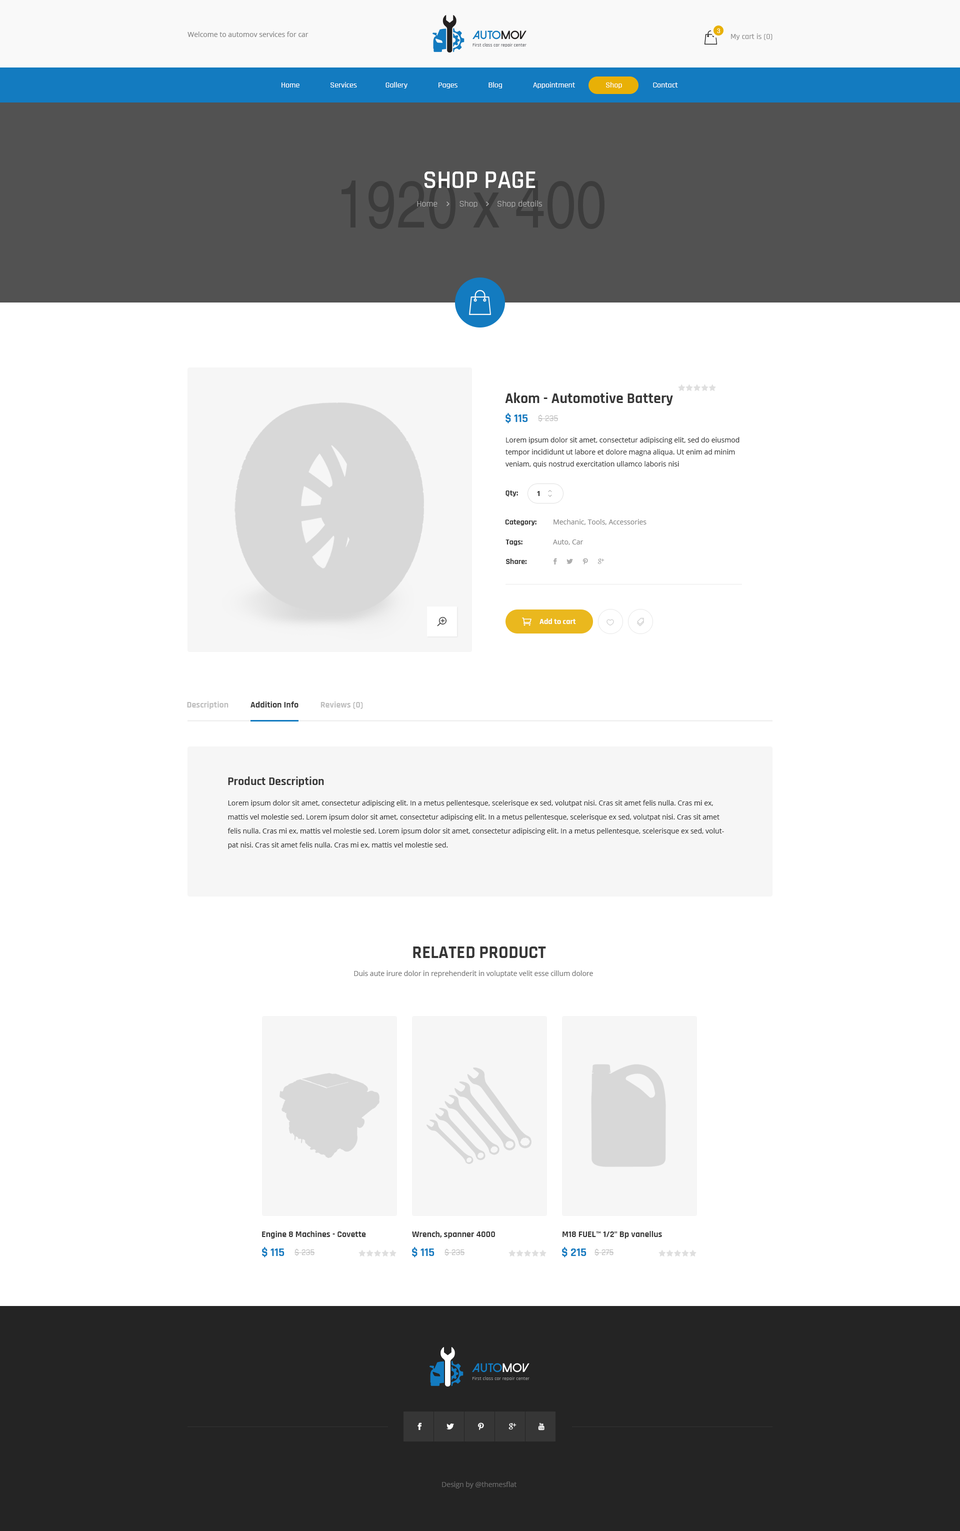
<style>
.page{position:relative;width:960px;height:1531px;background:#ffffff}
.page>*{position:absolute;margin:0}
.t1{font:6px "Poppins-Regular";color:#ffffff}
.t2{font:7px "OpenSans";color:#838383}
.t3{font:8px "Rajdhani-Medium";color:#8f8f8f}
.t4{font:8px "Rajdhani-Medium";color:#ffffff}
.t5{font:25px "Rajdhani-SemiBold";color:#ffffff;text-transform:uppercase}
.t6{font:9px "Rajdhani-Regular";color:#b5b5b5}
.t7{font:15px "Rajdhani-Bold";color:#363636}
.t8{font:12px "Rajdhani-Bold";color:#137bc0}
.t9{font:9px "Rajdhani-Regular";color:#b2b2b2}
.t10{font:7px/12px "OpenSans";color:#363636}
.t11{font:8px "Rajdhani-Bold";color:#363636}
.t12{font:7px "OpenSans-Bold";color:#363636}
.t13{font:7px "OpenSans";color:#868686}
.t14{font:8px "Rajdhani-Bold";color:#ffffff}
.t15{font:9px "Rajdhani-Bold";color:#363636}
.t16{font:9px "Rajdhani-Bold";color:#bdbdbd}
.t17{font:12px "Rajdhani-Bold";color:#363636}
.t18{font:7px/14px "OpenSans";color:#363636}
.t19{font:18px "Rajdhani-Bold";color:#363636;text-transform:uppercase}
.t20{font:7px "OpenSans";color:#737373}
.t21{font:7px "OpenSans";color:#6a6a6a}
</style>
<div class="page">
<p class="t1" style="left:717px;top:28px;width:3px;height:5px">3</p>
<p class="t2" style="left:188px;top:32px;width:120px;height:5px">Welcome to automov services for car</p>
<p class="t3" style="left:731px;top:34px;width:41px;height:6px">My cart is (0)</p>
<p class="t4" style="left:282px;top:82px;width:396px;height:6px">Home               Services              Gallery               Pages               Blog               Appointment               Shop               Contact</p>
<p class="t5" style="left:424px;top:172px;width:112px;height:16px">Shop page</p>
<p class="t6" style="left:417px;top:200px;width:125px;height:8px">Home         Shop        Shop details</p>
<p class="t7" style="left:505px;top:392px;width:168px;height:14px">Akom - Automotive Battery</p>
<p class="t8" style="left:506px;top:413px;width:22px;height:11px">$ 115</p>
<p class="t9" style="left:538px;top:414px;width:20px;height:8px">$ 235</p>
<p class="t10" style="left:506px;top:437px;width:234px;height:31px">Lorem ipsum dolor sit amet, consectetur adipiscing elit, sed do eiusmod tempor incididunt ut labore et dolore magna aliqua. Ut enim ad minim veniam, quis nostrud exercitation ullamco laboris nisi</p>
<p class="t11" style="left:506px;top:490px;width:12px;height:6px">Qty:</p>
<p class="t12" style="left:537px;top:491px;width:3px;height:5px">1</p>
<p class="t11" style="left:505px;top:520px;width:31px;height:6px">Category:</p>
<p class="t13" style="left:554px;top:519px;width:92px;height:6px">Mechanic, Tools, Accessories</p>
<p class="t11" style="left:506px;top:540px;width:16px;height:6px">Tags:</p>
<p class="t13" style="left:553px;top:540px;width:31px;height:5px">Auto, Car</p>
<p class="t11" style="left:506px;top:558px;width:20px;height:6px">Share:</p>
<p class="t14" style="left:540px;top:618px;width:36px;height:6px">Add to cart</p>
<p class="t15" style="left:187px;top:702px;width:176px;height:7px"><span class="t16">Description          </span> Addition Info  <span class="t16">         Reviews (0)</span></p>
<p class="t17" style="left:228px;top:776px;width:96px;height:11px">Product Description</p>
<p class="t18" style="left:228px;top:800px;width:496px;height:49px">Lorem ipsum dolor sit amet, consectetur adipiscing elit. In a metus pellentesque, scelerisque ex sed, volutpat nisi. Cras sit amet felis nulla. Cras mi ex, mattis vel molestie sed. Lorem ipsum dolor sit amet, consectetur adipiscing elit. In a metus pellentesque, scelerisque ex sed, volutpat nisi. Cras sit amet felis nulla. Cras mi ex, mattis vel molestie sed. Lorem ipsum dolor sit amet, consectetur adipiscing elit. In a metus pellentesque, scelerisque ex sed, volutpat nisi. Cras sit amet felis nulla. Cras mi ex, mattis vel molestie sed.</p>
<p class="t19" style="left:413px;top:946px;width:133px;height:12px">related product</p>
<p class="t20" style="left:354px;top:970px;width:239px;height:8px">Duis aute irure dolor in reprehenderit in voluptate velit esse cillum dolore</p>
<p class="t15" style="left:262px;top:1231px;width:104px;height:7px">Engine 8 Machines - Covette</p>
<p class="t15" style="left:412px;top:1231px;width:83px;height:7px">Wrench, spanner 4000</p>
<p class="t15" style="left:562px;top:1231px;width:100px;height:7px">M18 FUEL™ 1/2" Bp vanellus</p>
<p class="t8" style="left:262px;top:1247px;width:22px;height:11px">$ 115</p>
<p class="t9" style="left:294px;top:1248px;width:21px;height:8px">$ 235</p>
<p class="t8" style="left:412px;top:1247px;width:22px;height:11px">$ 115</p>
<p class="t9" style="left:444px;top:1248px;width:21px;height:8px">$ 235</p>
<p class="t8" style="left:562px;top:1247px;width:24px;height:11px">$ 215</p>
<p class="t9" style="left:594px;top:1248px;width:20px;height:8px">$ 275</p>
<p class="t21" style="left:442px;top:1482px;width:74px;height:6px">Design by @themesflat</p>
</div>
